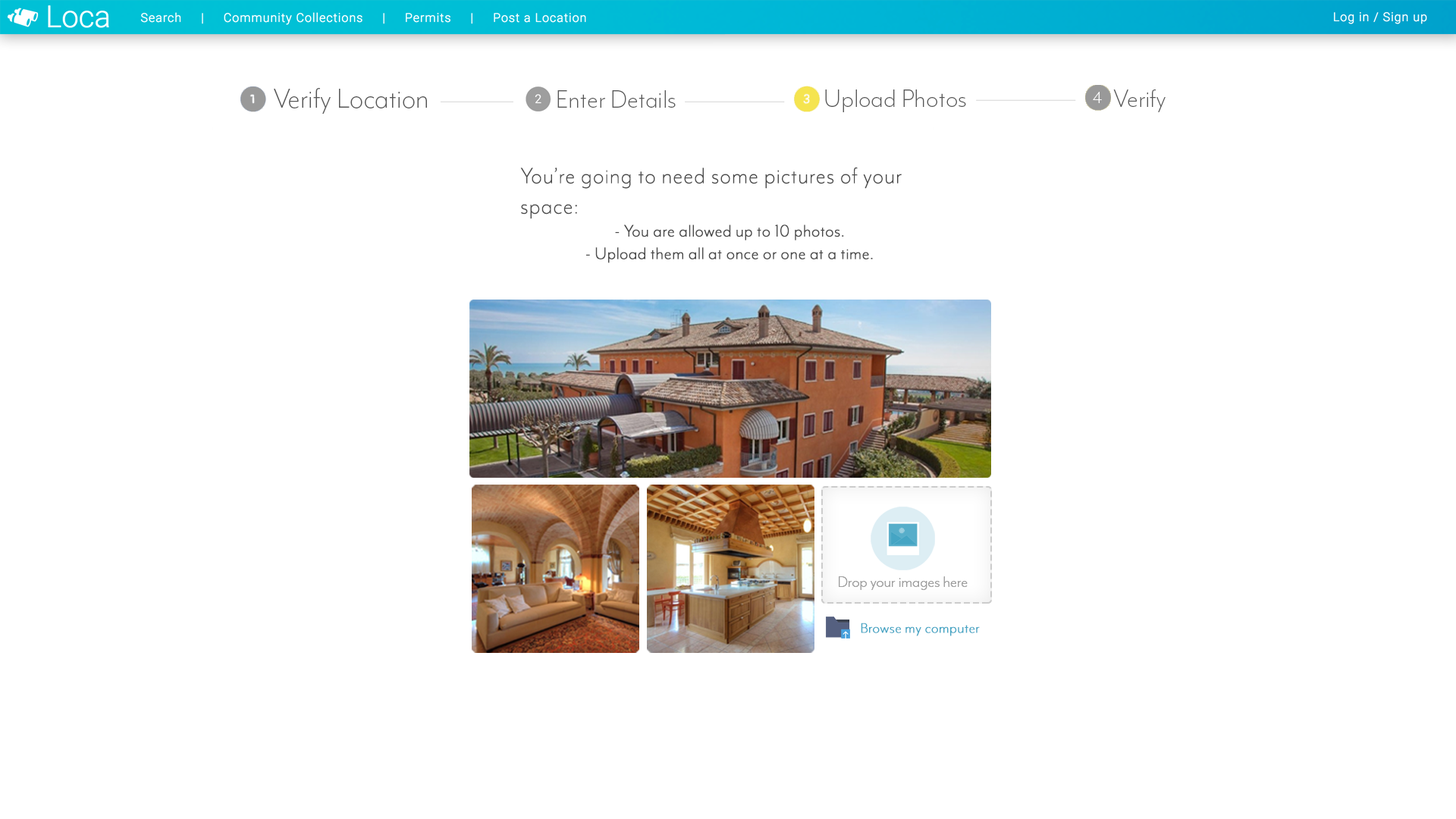
<style>
.page{position:relative;width:1456px;height:819px;background:#ffffff}
.page>*{position:absolute;margin:0}
.t1{font:31.6px "MrEavesModOT-Light";color:#585858}
.t2{font:28.4px "MrEavesModOT-Light";color:#585858}
.t3{font:19px "MrEavesModOT-Light";color:#ffffff}
.t4{font:18.9px "MrEavesModOT-Light";color:#4b4b4b;font-weight:bold}
.t5{font:25.3px "MrEavesModOT-Light";color:#4b4b4b;font-weight:bold}
.t6{font:4.1px "MrEavesModOT-Light";color:#a0a0a0}
.t7{font:16px "MrEavesModOT-Light";color:#45a5c4;font-weight:bold}
</style>
<div class="page">
<p class="t1" style="left:274px;top:88px;width:153px;height:26px">verify Location</p>
<p class="t2" style="left:825px;top:89px;width:141px;height:23px">Upload Photos</p>
<p class="t2" style="left:1113px;top:89px;width:53px;height:23px">Verify</p>
<p class="t2" style="left:557px;top:90px;width:119px;height:18px">Enter Details</p>
<p class="t3" style="left:1093px;top:92px;width:9px;height:11px">4</p>
<p class="t4" style="left:520px;top:167px;width:382px;height:96px"><span class="t5">You’re going to need some pictures of your space:<br></span>- You are allowed up to 10 photos. <br>- Upload them all at once or one at a time.</p>
<p class="t6" style="left:839px;top:576px;width:129px;height:14px">Drop your images here</p>
<p class="t6" style="left:839px;top:576px;width:129px;height:14px">Drop your images here</p>
<p class="t7" style="left:861px;top:623px;width:119px;height:13px">Browse my computer</p>
</div>
